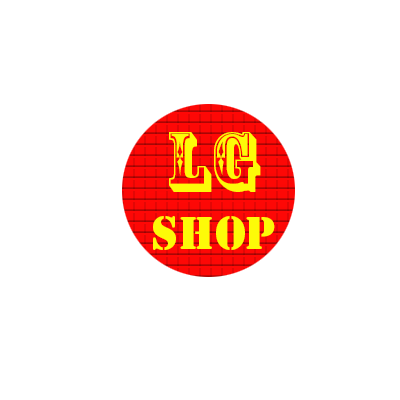
<style>
.page{position:relative;width:400px;height:400px;background:#ffffff}
.page>*{position:absolute;margin:0}
.t1{font:80px "RosewoodStd-Regular";color:#fdfa08}
.t2{font:43px "StencilStd";color:#fdfa08}
</style>
<div class="page">
<p class="t1" style="left:169px;top:132px;width:92px;height:60px">lg</p>
<p class="t2" style="left:153px;top:216px;width:122px;height:34px">shop</p>
</div>
